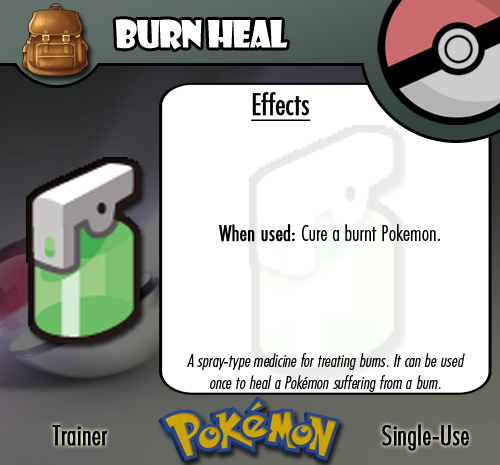
<style>
.page{position:relative;width:500px;height:465px;background:#ffffff}
.page>*{position:absolute;margin:0}
.t1{font:36.7px "ShowcardGothic-Reg";letter-spacing:-0.025em;color:#ffffff;scale:0.91 1}
.t2{font:22.2px "FuturaCondensedBQ-Light";color:#010101}
.t3{font:27.8px "FuturaCondensedBQ-Light";color:#010101;font-weight:bold}
.t4{font:30.6px "FuturaCondensedBQ-Light";color:#010101;font-weight:bold;text-decoration:underline}
.t5{font:22.2px "FuturaCondensedBQ-Light";color:#010101;font-weight:bold}
.t6{font:18.1px "FuturaCondensedBQ-Light";color:#010101;font-style:italic}
</style>
<div class="page">
<p class="t1" style="left:115px;top:19px;width:173px;height:31px">Burn Heal</p>
<p class="t2" style="left:219px;top:92px;width:221px;height:150px"><span class="t3">  </span><span class="t4">Effects<br><br><br><br></span><span class="t5">When used: </span>Cure a burnt Pokemon.</p>
<p class="t6" style="left:187px;top:353px;width:278px;height:39px;text-align:center">A spray-type medicine for treating burns. It can be used once to heal a Pokémon suffering from a burn.</p>
<p class="t3" style="left:52px;top:425px;width:55px;height:21px">Trainer</p>
<p class="t3" style="left:382px;top:424px;width:87px;height:27px">Single-Use</p>
</div>
